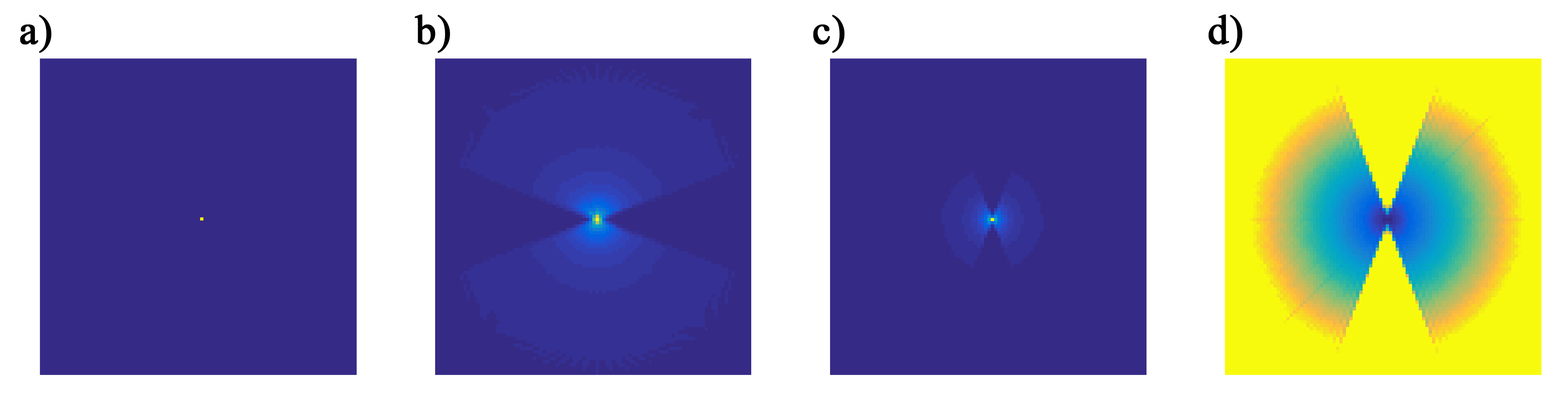
<style>
.page{position:relative;width:1568px;height:399px;background:#352a86}
.page>*{position:absolute;margin:0}
.t1{font:41.5px "TimesNewRomanPSMT";color:#000000;font-weight:bold}
</style>
<div class="page">
<p class="t1" style="left:20px;top:15px;width:31px;height:38px">a)</p>
<p class="t1" style="left:414px;top:15px;width:36px;height:38px">b)</p>
<p class="t1" style="left:813px;top:15px;width:32px;height:38px">c)</p>
<p class="t1" style="left:1208px;top:15px;width:34px;height:38px">d)</p>
</div>
